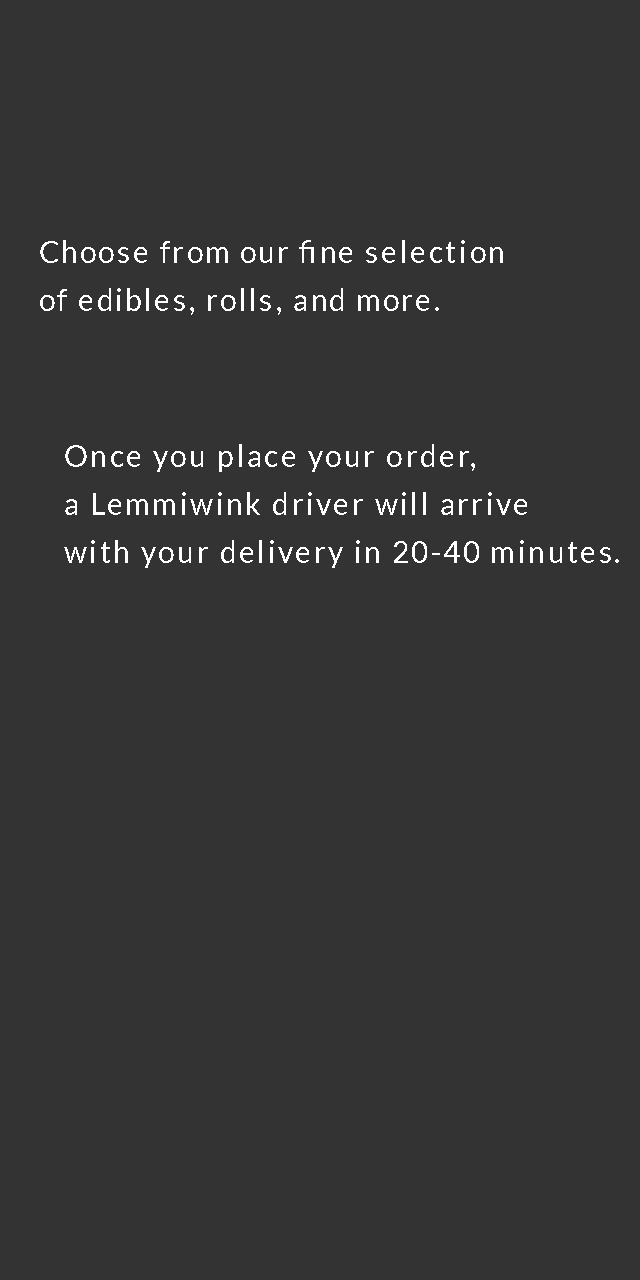
<style>
.page{position:relative;width:640px;height:1280px;background:#333333}
.page>*{position:absolute;margin:0}
.t1{font:30px/48px "Lato-Regular";letter-spacing:0.08em;color:#ffffff}
</style>
<div class="page">
<p class="t1" style="left:40px;top:240px;width:463px;height:75px">Choose from our fine selection <br>of edibles, rolls, and more.</p>
<p class="t1" style="left:64px;top:444px;width:555px;height:124px">Once you place your order,<br>a Lemmiwink driver will arrive<br>with your delivery in 20-40 minutes.</p>
</div>
